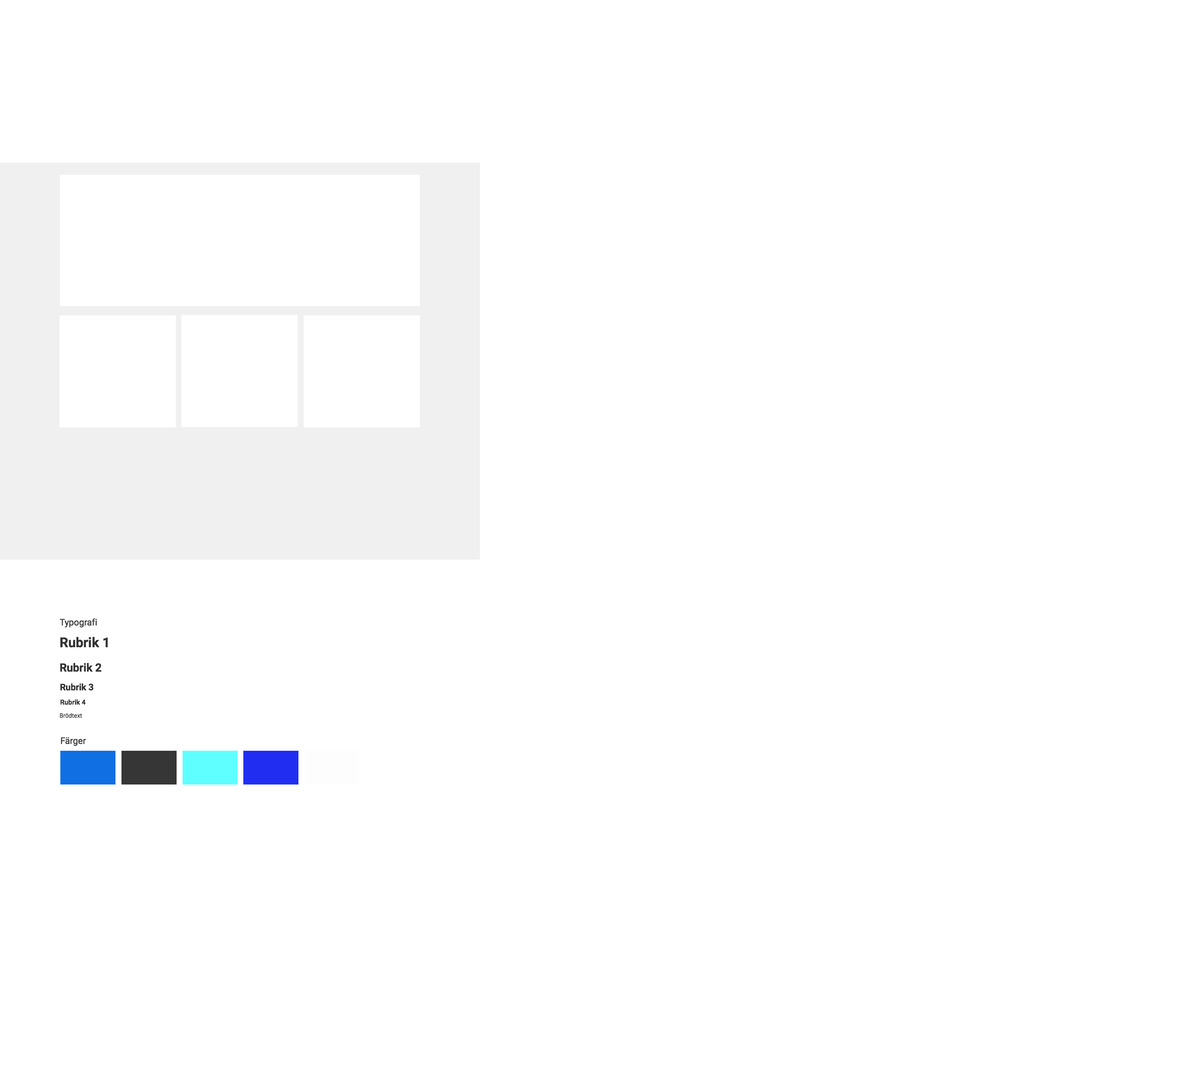
<style>
.page{position:relative;width:1202px;height:1089px;background:#ffffff}
.page>*{position:absolute;margin:0}
.t1{font:9px "Roboto-Regular";color:#333333}
.t2{font:13.5px "Roboto-Bold";color:#333333}
.t3{font:11.2px "Roboto-Bold";color:#333333}
.t4{font:9px "Roboto-Bold";color:#333333}
.t5{font:6.8px "Roboto-Bold";color:#333333}
.t6{font:6px "Roboto-Regular";color:#333333}
</style>
<div class="page">
<p class="t1" style="left:60px;top:618px;width:37px;height:10px">Typografi</p>
<p class="t2" style="left:60px;top:637px;width:48px;height:11px">Rubrik 1</p>
<p class="t3" style="left:60px;top:663px;width:42px;height:9px">Rubrik 2</p>
<p class="t4" style="left:60px;top:683px;width:33px;height:8px">Rubrik 3</p>
<p class="t5" style="left:60px;top:699px;width:26px;height:6px">Rubrik 4</p>
<p class="t6" style="left:60px;top:713px;width:22px;height:5px">Brödtext</p>
<p class="t1" style="left:61px;top:737px;width:25px;height:9px">Färger</p>
</div>
